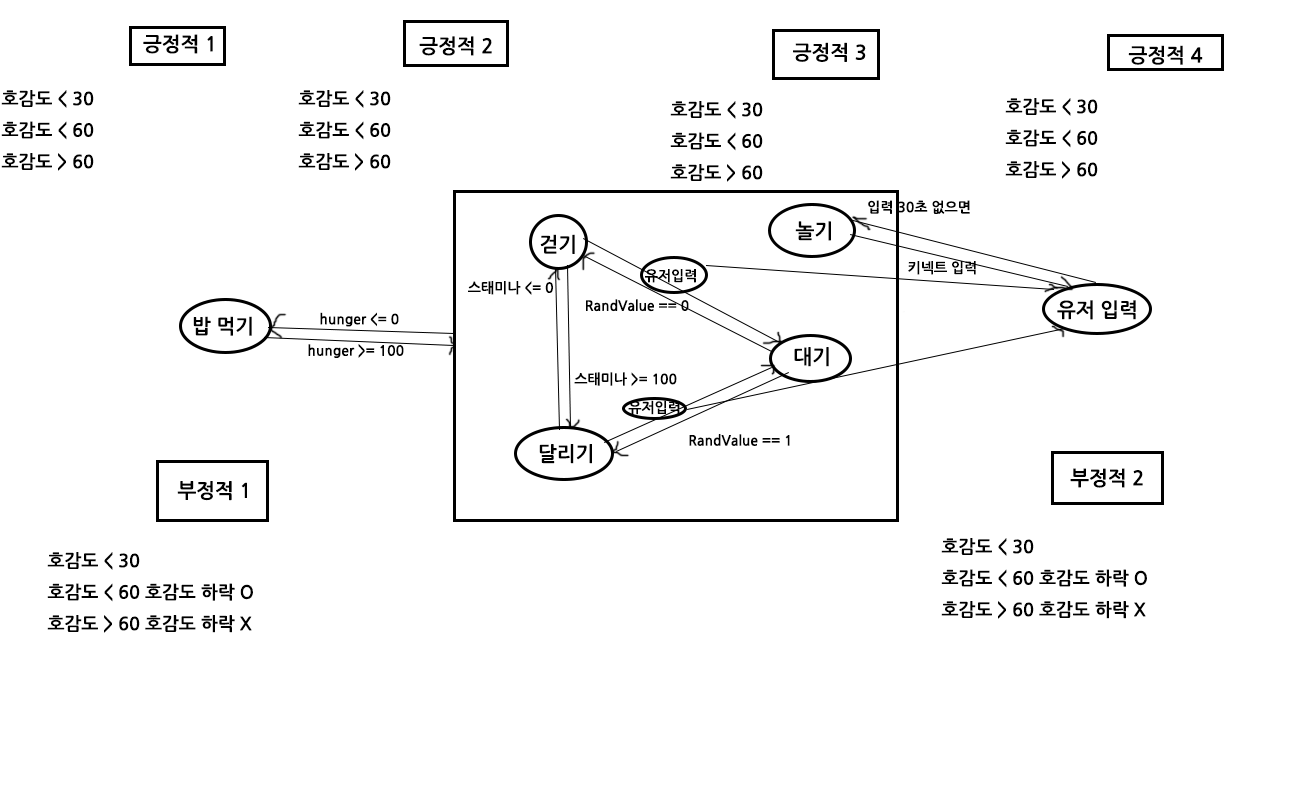
<style>
.page{position:relative;width:1300px;height:800px;background:#ffffff}
.page>*{position:absolute;margin:0}
.t1{font:20px "NanumGothicBold";color:#000000}
.t2{font:18px "NanumGothicBold";color:#000000}
.t3{font:14px "NanumGothicBold";color:#000000}
</style>
<div class="page">
<p class="t1" style="left:143px;top:34px;width:70px;height:20px">긍정적 1</p>
<p class="t1" style="left:419px;top:36px;width:73px;height:20px">긍정적 2</p>
<p class="t1" style="left:793px;top:42px;width:73px;height:20px">긍정적 3</p>
<p class="t1" style="left:1128px;top:45px;width:75px;height:20px">긍정적 4</p>
<p class="t2" style="left:1px;top:90px;width:93px;height:81px">호감도 &lt; 30<br>호감도 &lt; 60<br>호감도 &gt; 60</p>
<p class="t2" style="left:298px;top:90px;width:93px;height:81px">호감도 &lt; 30<br>호감도 &lt; 60<br>호감도 &gt; 60</p>
<p class="t2" style="left:670px;top:101px;width:93px;height:81px">호감도 &lt; 30<br>호감도 &lt; 60<br>호감도 &gt; 60</p>
<p class="t2" style="left:1005px;top:98px;width:93px;height:81px">호감도 &lt; 30<br>호감도 &lt; 60<br>호감도 &gt; 60</p>
<p class="t3" style="left:868px;top:200px;width:102px;height:14px">입력 30초 없으면</p>
<p class="t1" style="left:795px;top:221px;width:36px;height:20px">놀기</p>
<p class="t1" style="left:540px;top:234px;width:35px;height:20px">걷기</p>
<p class="t3" style="left:645px;top:269px;width:51px;height:14px">유저입력</p>
<p class="t3" style="left:908px;top:261px;width:68px;height:14px">키넥트 입력</p>
<p class="t3" style="left:468px;top:281px;width:85px;height:14px">스태미나 &lt;= 0</p>
<p class="t3" style="left:586px;top:299px;width:103px;height:13px">RandValue == 0</p>
<p class="t1" style="left:1057px;top:300px;width:79px;height:20px">유저 입력</p>
<p class="t1" style="left:193px;top:316px;width:59px;height:20px">밥 먹기</p>
<p class="t3" style="left:320px;top:312px;width:79px;height:15px">hunger &lt;= 0</p>
<p class="t3" style="left:308px;top:344px;width:96px;height:14px">hunger &gt;= 100</p>
<p class="t1" style="left:794px;top:347px;width:35px;height:20px">대기</p>
<p class="t3" style="left:574px;top:372px;width:103px;height:15px">스태미나 &gt;= 100</p>
<p class="t3" style="left:628px;top:400px;width:52px;height:15px">유저입력</p>
<p class="t3" style="left:689px;top:434px;width:101px;height:12px">RandValue == 1</p>
<p class="t1" style="left:539px;top:444px;width:53px;height:20px">달리기</p>
<p class="t1" style="left:1070px;top:468px;width:73px;height:20px">부정적 2</p>
<p class="t1" style="left:177px;top:481px;width:70px;height:20px">부정적 1</p>
<p class="t2" style="left:941px;top:538px;width:206px;height:81px">호감도 &lt; 30<br>호감도 &lt; 60 호감도 하락 O<br>호감도 &gt; 60 호감도 하락 X</p>
<p class="t2" style="left:47px;top:552px;width:206px;height:81px">호감도 &lt; 30<br>호감도 &lt; 60 호감도 하락 O <br>호감도 &gt; 60 호감도 하락 X</p>
</div>
